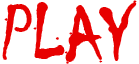
<style>
.page{position:relative;width:139px;height:64px;background:#ffffff}
.page>*{position:absolute;margin:0}
.t1{font:76.4px "Chiller-Regular";color:#e70101}
</style>
<div class="page">
<p class="t1" style="left:3px;top:1px;width:133px;height:62px">PLAY</p>
</div>
